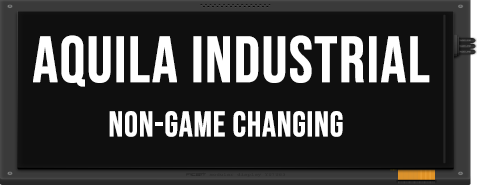
<style>
.page{position:relative;width:477px;height:185px;background:#0f0f0f}
.page>*{position:absolute;margin:0}
.t1{font:65px "BebasNeue-Regular";color:#ffffff;font-weight:bold}
.t2{font:35px "BebasNeue-Regular";color:#ffffff;font-weight:bold}
</style>
<div class="page">
<p class="t1" style="left:33px;top:35px;width:397px;height:52px">AQUILA INDUSTRIAL</p>
<p class="t2" style="left:109px;top:111px;width:234px;height:26px">Non-game changing</p>
</div>
